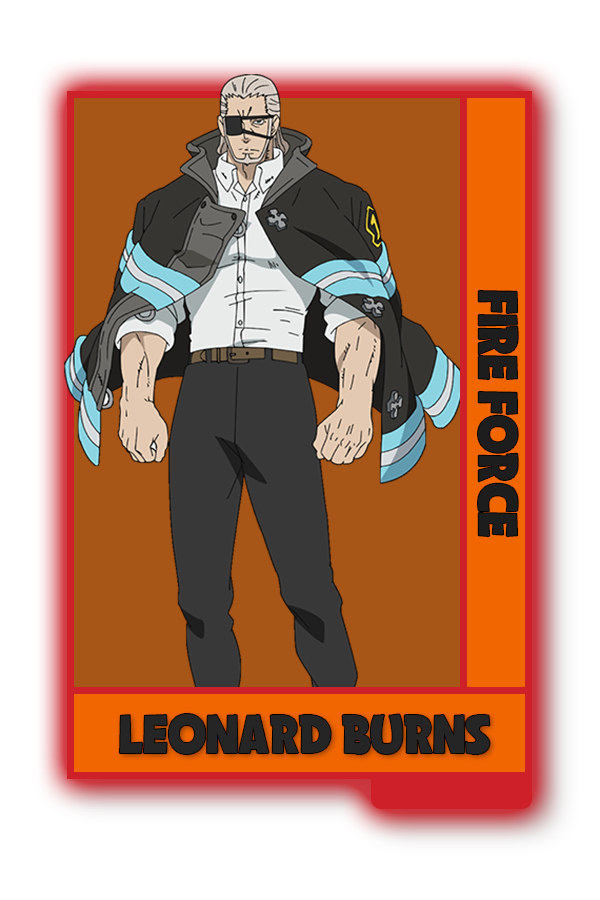
<style>
.page{position:relative;width:600px;height:900px;background:#ffffff}
.page>*{position:absolute;margin:0}
.t1{font:69.6px "AristonComicDemo-Regular";color:#1d1d1d}
.t2{font:69.1px "AristonComicDemo-Regular";color:#252525}
</style>
<div class="page">
<p class="t1" style="left:478px;top:291px;width:40px;height:245px;rotate:90deg">FIRE FORCE</p>
<p class="t2" style="left:120px;top:714px;width:370px;height:40px">LEONARD BURNS</p>
</div>
